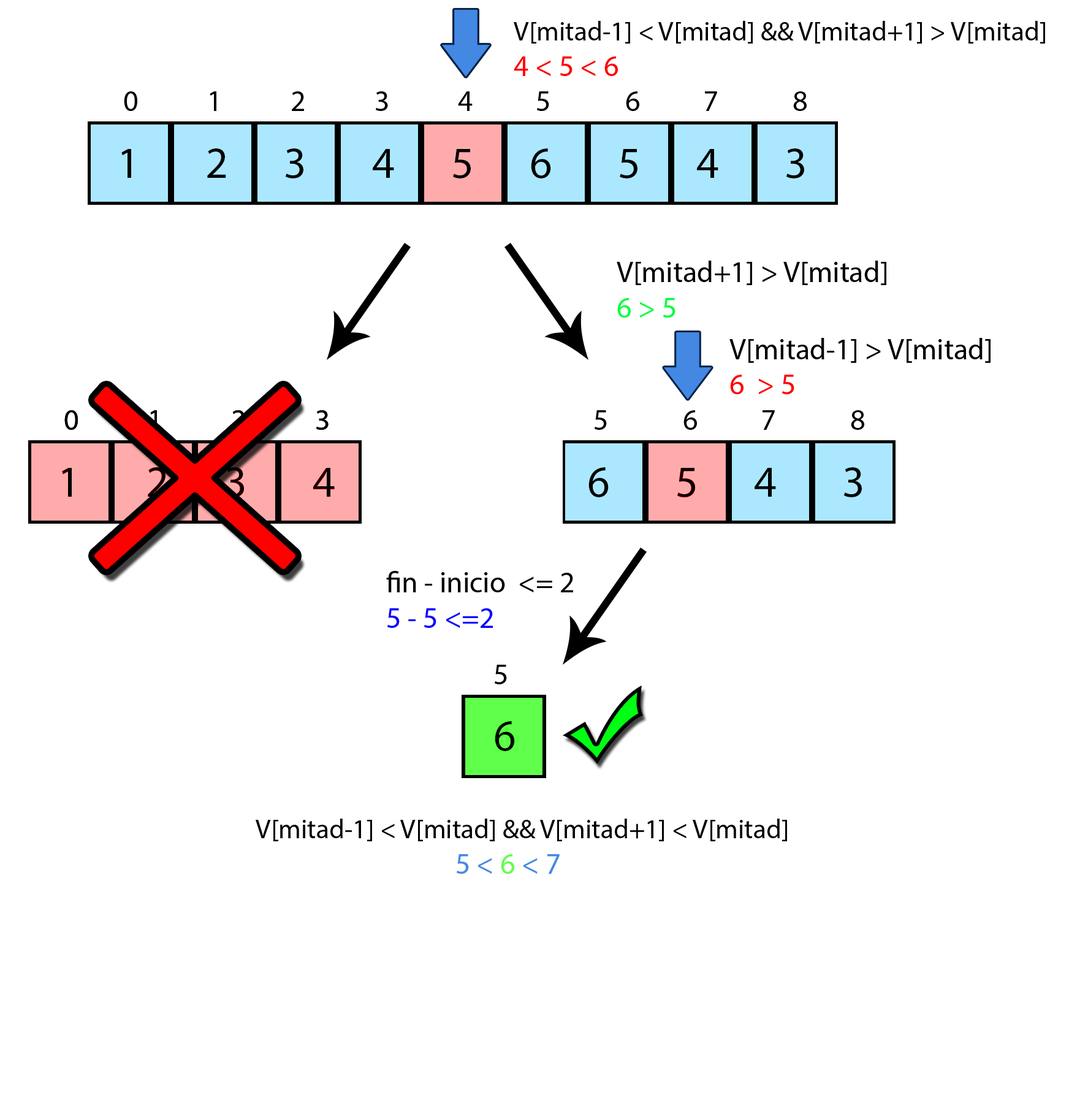
<style>
.page{position:relative;width:1069px;height:1116px;background:#ffffff}
.page>*{position:absolute;margin:0}
.t1{font:27px "MyriadPro-Regular";color:#000000}
.t2{font:29.4px "MyriadPro-Regular";color:#fe0000}
.t3{font:29.4px "MyriadPro-Regular";color:#000000}
.t4{font:29.4px "MyriadPro-Regular";color:#00ff3c}
.t5{font:29.4px "MyriadPro-Regular";color:#ff0000}
.t6{font:29.4px "MyriadPro-Regular";color:#0600ff}
.t7{font:29.4px "MyriadPro-Regular";color:#4488e2}
.t8{font:29.4px "MyriadPro-Regular";color:#5fff4b}
</style>
<div class="page">
<p class="t1" style="left:514px;top:21px;width:531px;height:55px">V[mitad-1] &lt; V[mitad] &amp;&amp; V[mitad+1] &gt; V[mitad]<br><span class="t2">4 &lt; 5 &lt; 6</span></p>
<p class="t3" style="left:617px;top:260px;width:269px;height:57px">V[mitad+1] &gt; V[mitad]<br><span class="t4">6 &gt; 5</span></p>
<p class="t3" style="left:729px;top:338px;width:261px;height:56px">V[mitad-1] &gt; V[mitad]<br><span class="t5">6  &gt; 5</span></p>
<p class="t3" style="left:386px;top:571px;width:187px;height:57px">fin - inicio  &lt;= 2<br><span class="t6">5 - 5 &lt;=2</span></p>
<p class="t1" style="left:256px;top:818px;width:531px;height:55px">V[mitad-1] &lt; V[mitad] &amp;&amp; V[mitad+1] &lt; V[mitad]<br>                                <span class="t7">5 &lt;</span><span class="t8"> 6 </span><span class="t7">&lt; 7</span></p>
</div>
